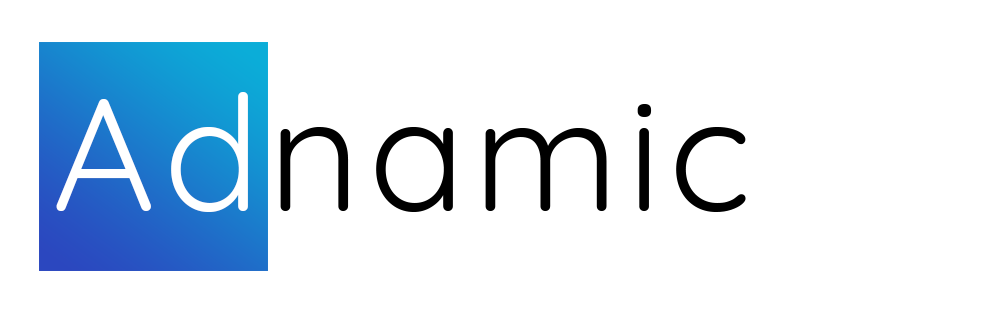
<style>
.page{position:relative;width:1002px;height:312px;background:#ffffff}
.page>*{position:absolute;margin:0}
.t1{font:160px "Quicksand-Regular";letter-spacing:0.05em;color:#000000}
.t2{font:160px "Quicksand-Regular";letter-spacing:0.05em;color:#ffffff}
</style>
<div class="page">
<p class="t1" style="left:56px;top:92px;width:690px;height:120px"><span class="t2">Ad</span>namic</p>
</div>
